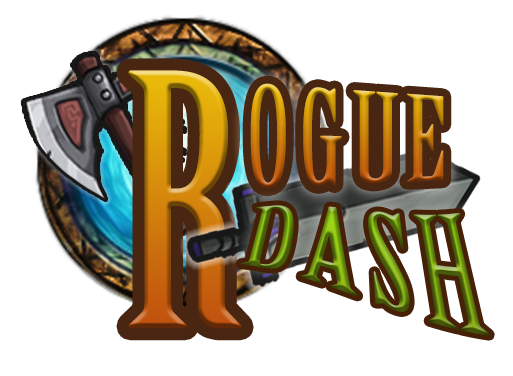
<style>
.page{position:relative;width:513px;height:376px;background:#ffffff}
.page>*{position:absolute;margin:0}
.t1{font:343.2px "BirchStd";letter-spacing:0.05em}
.t2{font:126.2px "BirchStd";letter-spacing:0.05em;scale:1.12 1}
.t3{font:119.3px "BirchStd";letter-spacing:0.05em;scale:1.37 1}
</style>
<div class="page">
<p class="t1" style="left:128px;top:70px;width:114px;height:259px">R</p>
<p class="t2" style="left:250px;top:83px;width:194px;height:106px">OGUE</p>
<p class="t3" style="left:240px;top:205px;width:250px;height:131px">DASH</p>
</div>
